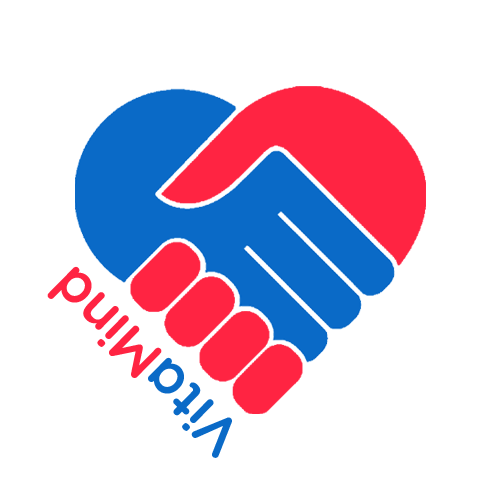
<style>
.page{position:relative;width:500px;height:499px;background:#ffffff}
.page>*{position:absolute;margin:0}
.t1{font:57px "Quicksand-Bold";color:#0a6ac7}
.t2{font:57px "Quicksand-Bold";color:#ff2442}
</style>
<div class="page">
<p class="t1" style="left:47px;top:266px;width:185px;height:192px;rotate:-135deg">Vita<span class="t2">Mind</span></p>
</div>
